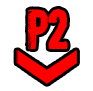
<style>
.page{position:relative;width:93px;height:91px;background:#ffffff}
.page>*{position:absolute;margin:0}
.t1{font:60px "CFJacquesParizeau-Regular";color:#ff0000}
</style>
<div class="page">
<p class="t1" style="left:27px;top:9px;width:41px;height:40px">P2</p>
</div>
